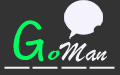
<style>
.page{position:relative;width:120px;height:75px;background:#333333}
.page>*{position:absolute;margin:0}
.t1{font:28.7px "STXingkai";color:#f3f2f8}
.t2{font:57.4px "HannotateSC-W5";color:#04fb61}
.t3{font:28.7px "STBaoli-SC-Regular";color:#04fb61}
</style>
<div class="page">
<p class="t1" style="left:13px;top:20px;width:94px;height:42px"><span class="t2">G</span><span class="t3">o</span>Man</p>
</div>
